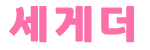
<style>
.page{position:relative;width:150px;height:50px;background:#ffffff}
.page>*{position:absolute;margin:0}
.t1{font:43.1px "GyeonggiTitleBOTF";letter-spacing:0.12em;color:#fd6fa9;font-weight:bold}
</style>
<div class="page">
<p class="t1" style="left:9px;top:6px;width:125px;height:37px">세게더</p>
</div>
